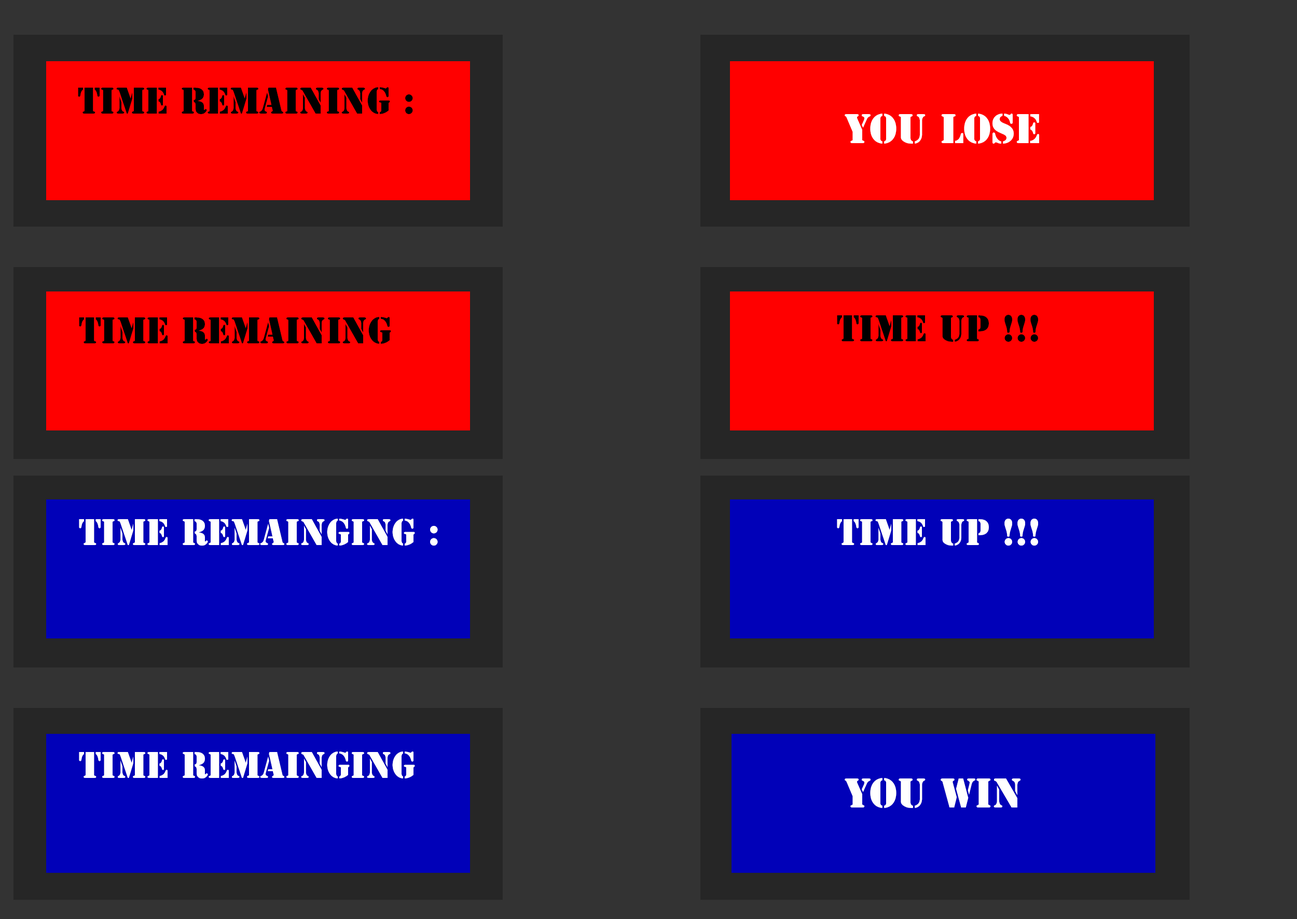
<style>
.page{position:relative;width:1297px;height:919px;background:#333333}
.page>*{position:absolute;margin:0}
.t1{font:34.6px "StencilStd";color:#000000}
.t2{font:38.9px "StencilStd";color:#ffffff}
.t3{font:34.6px "StencilStd";color:#ffffff}
</style>
<div class="page">
<p class="t1" style="left:78px;top:87px;width:335px;height:27px">Time Remaining :</p>
<p class="t2" style="left:845px;top:114px;width:194px;height:30px">You lose</p>
<p class="t1" style="left:79px;top:317px;width:335px;height:27px">Time Remaining :</p>
<p class="t1" style="left:837px;top:315px;width:201px;height:27px">Time Up !!!</p>
<p class="t3" style="left:79px;top:519px;width:359px;height:27px">Time Remainging :</p>
<p class="t3" style="left:837px;top:519px;width:201px;height:27px">Time Up !!!</p>
<p class="t3" style="left:79px;top:752px;width:359px;height:27px">Time Remainging :</p>
<p class="t2" style="left:845px;top:778px;width:176px;height:30px">You win</p>
</div>
